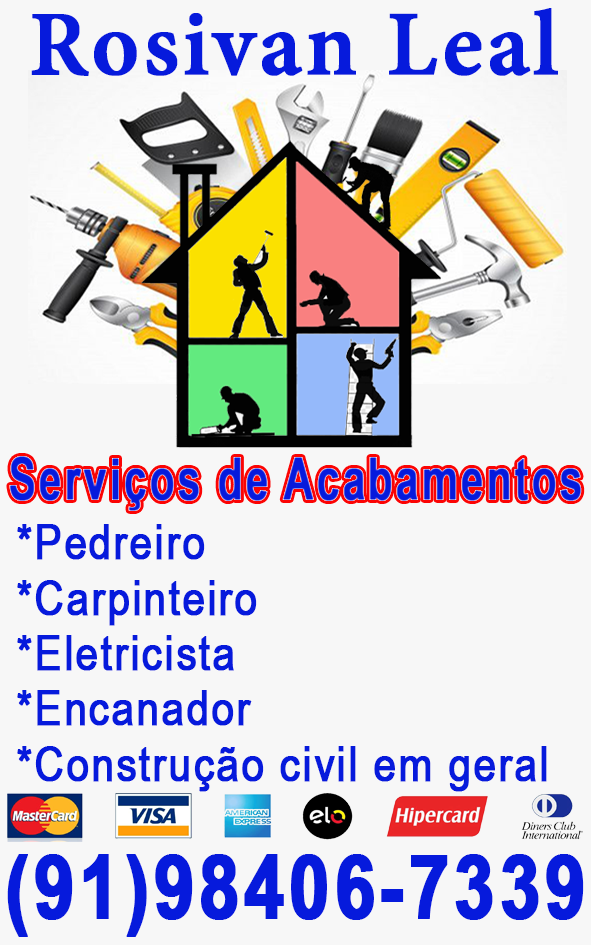
<style>
.page{position:relative;width:591px;height:945px;background:#f7f7f7}
.page>*{position:absolute;margin:0}
.t1{font:100px "AdobeDevanagari-Bold";letter-spacing:0.03em;color:#061adc;font-weight:bold}
.t2{font:57.5px "ArialNarrow-Bold";letter-spacing:0.03em;color:#061adc;font-weight:bold;scale:0.87 1}
.t3{font:48.5px/55.3px "ArialNarrow";letter-spacing:0.03em;color:#061adc;font-weight:bold}
.t4{font:89.3px "ArialNarrow-Bold";letter-spacing:0.03em;color:#061adc;font-weight:bold}
</style>
<div class="page">
<p class="t1" style="left:31px;top:8px;width:527px;height:68px">Rosivan Leal</p>
<p class="t2" style="left:9px;top:456px;width:573px;height:55px">Serviços de Acabamentos</p>
<p class="t3" style="left:17px;top:524px;width:530px;height:268px">*Pedreiro<br>*Carpinteiro<br>*Eletricista<br>*Encanador<br>*Construção civil em geral</p>
<p class="t4" style="left:7px;top:854px;width:577px;height:83px">(91)98406-7339</p>
</div>
